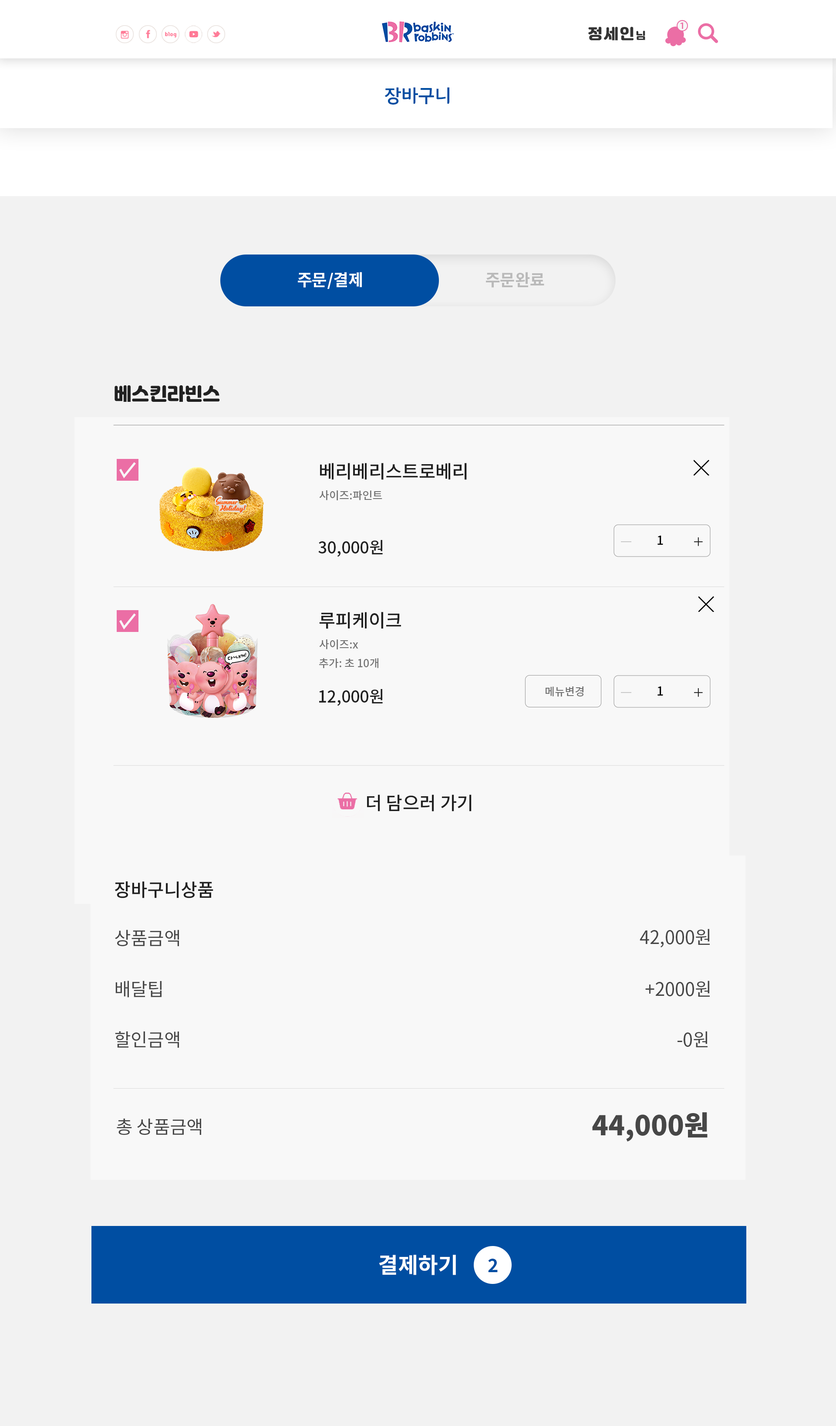
<style>
.page{position:relative;width:836px;height:1426px;background:#f8f8f8}
.page>*{position:absolute;margin:0}
.t1{font:14.4px "JalnanOTF";letter-spacing:0.1em;color:#343434}
.t2{font:9.9px "JalnanOTF";letter-spacing:0.1em;color:#343434}
.t3{font:8.9px "Handon3gyeopsalOTF600g";color:#eb6ea5}
.t4{font:18.2px "Handon3gyeopsalOTF600g";color:#004ea2}
.t5{font:16.3px "NotoSansCJKkr-Bold";color:#ffffff}
.t6{font:16.3px "NotoSansCJKkr-Bold";color:#bababa}
.t7{font:17.7px "JalnanOTF";color:#212121}
.t8{font:18.2px "NotoSansCJKkr-Medium";color:#212121}
.t9{font:10.9px "NotoSansCJKkr-Medium";color:#747474}
.t10{font:16.3px "NotoSansCJKkr-Medium";color:#212121}
.t11{font:12.7px "NotoSansCJKkr-Medium";color:#070707}
.t12{font:18.2px "NotoSansCJKkr-Regular";color:#474747}
.t13{font:27.2px "NotoSansCJKkr-Black";color:#474747}
.t14{font:21.8px "NotoSansCJKkr-Bold";color:#ffffff}
.t15{font:18.2px "NotoSansCJKkr-Bold";color:#004ea2}
</style>
<div class="page">
<p class="t1" style="left:589px;top:27px;width:57px;height:14px">정세인<span class="t2">님</span></p>
<p class="t3" style="left:681px;top:22px;width:3px;height:7px">1</p>
<p class="t4" style="left:385px;top:87px;width:65px;height:18px">장바구니</p>
<p class="t5" style="left:298px;top:272px;width:64px;height:17px">주문/결제</p>
<p class="t6" style="left:486px;top:272px;width:59px;height:16px">주문완료</p>
<p class="t7" style="left:115px;top:385px;width:105px;height:17px">베스킨라빈스</p>
<p class="t8" style="left:320px;top:463px;width:147px;height:17px">베리베리스트로베리</p>
<p class="t9" style="left:319px;top:490px;width:64px;height:10px">사이즈:파인트</p>
<p class="t10" style="left:318px;top:540px;width:65px;height:17px">30,000원</p>
<p class="t11" style="left:658px;top:535px;width:6px;height:10px">1</p>
<p class="t8" style="left:319px;top:612px;width:82px;height:17px">루피케이크</p>
<p class="t9" style="left:319px;top:639px;width:40px;height:10px">사이즈:x</p>
<p class="t9" style="left:319px;top:658px;width:60px;height:10px">추가: 초 10개</p>
<p class="t10" style="left:319px;top:689px;width:64px;height:17px">12,000원</p>
<p class="t9" style="left:546px;top:686px;width:38px;height:11px">메뉴변경</p>
<p class="t11" style="left:658px;top:686px;width:6px;height:9px">1</p>
<p class="t8" style="left:367px;top:794px;width:105px;height:17px">더 담으러 가기</p>
<p class="t8" style="left:115px;top:881px;width:98px;height:17px">장바구니상품</p>
<p class="t12" style="left:115px;top:929px;width:64px;height:17px">상품금액</p>
<p class="t12" style="left:640px;top:928px;width:70px;height:19px">42,000원</p>
<p class="t12" style="left:115px;top:980px;width:47px;height:17px">배달팁</p>
<p class="t12" style="left:646px;top:980px;width:64px;height:16px">+2000원</p>
<p class="t12" style="left:115px;top:1031px;width:64px;height:16px">할인금액</p>
<p class="t12" style="left:678px;top:1031px;width:30px;height:16px">-0원</p>
<p class="t12" style="left:117px;top:1118px;width:84px;height:16px">총 상품금액</p>
<p class="t13" style="left:593px;top:1112px;width:115px;height:29px">44,000원</p>
<p class="t14" style="left:379px;top:1254px;width:77px;height:21px">결제하기</p>
<p class="t15" style="left:488px;top:1258px;width:10px;height:14px">2</p>
</div>
